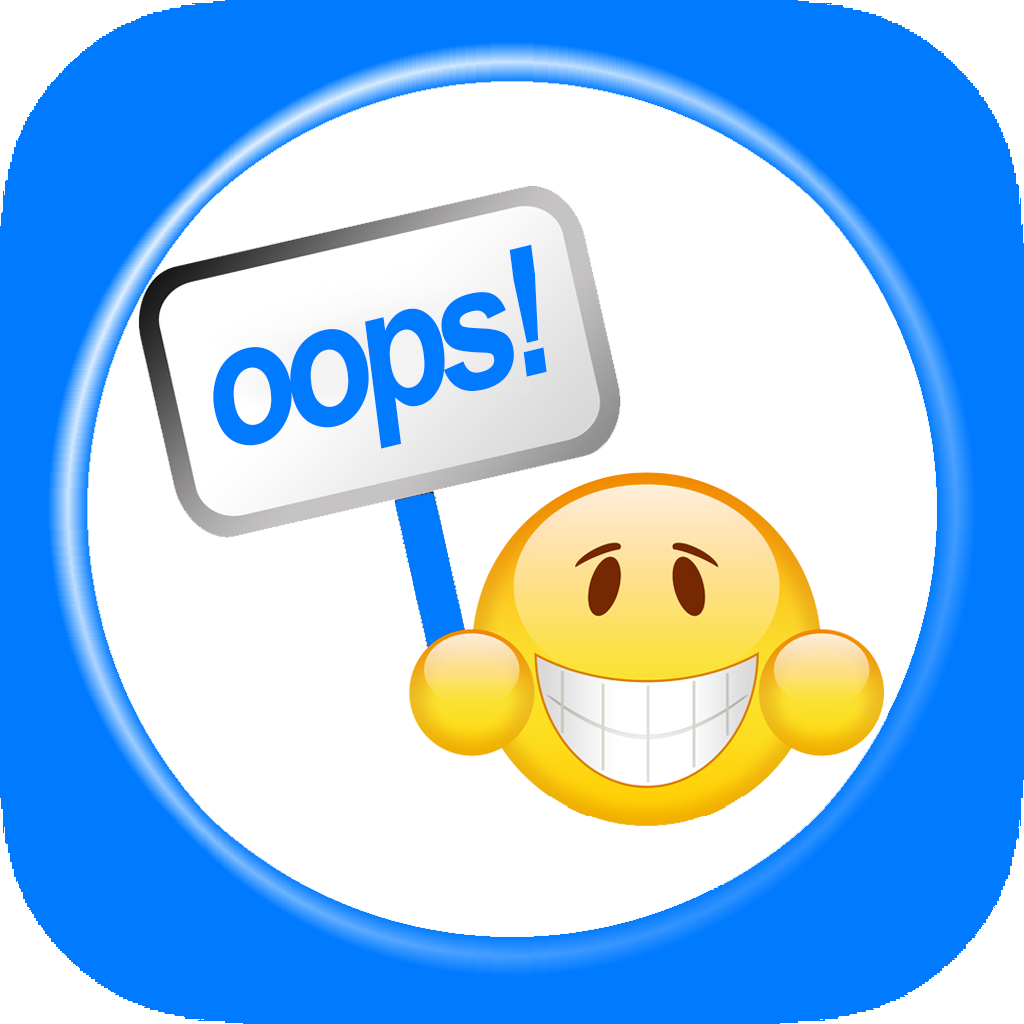
<style>
.page{position:relative;width:1024px;height:1024px;background:#ffffff}
.page>*{position:absolute;margin:0}
.t1{font:178.8px "Arial-BoldMT";letter-spacing:-0.08em;color:#007aff;scale:0.83 1}
</style>
<div class="page">
<p class="t1" style="left:213px;top:244px;width:334px;height:205px;rotate:-14deg">oops!</p>
</div>
